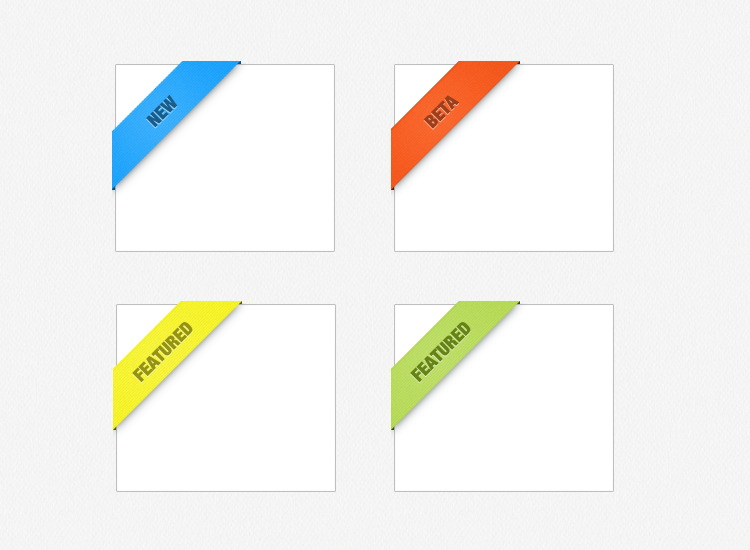
<style>
.page{position:relative;width:750px;height:550px;background:#ffffff}
.page>*{position:absolute;margin:0}
.t1{font:18px "HelveticaNeue-CondensedBlack";color:#175e8d}
.t2{font:18px "HelveticaNeue-CondensedBlack";color:#9f3e18}
.t3{font:18px "HelveticaNeue-CondensedBlack";color:#959312}
.t4{font:18px "HelveticaNeue-CondensedBlack";color:#658413}
</style>
<div class="page">
<p class="t1" style="left:146px;top:94px;width:32px;height:34px;rotate:-45deg">NEW</p>
<p class="t2" style="left:423px;top:95px;width:37px;height:34px;rotate:-45deg">BETA</p>
<p class="t3" style="left:132px;top:322px;width:61px;height:61px;rotate:-45deg">FEATURED</p>
<p class="t4" style="left:410px;top:322px;width:61px;height:61px;rotate:-45deg">FEATURED</p>
</div>
